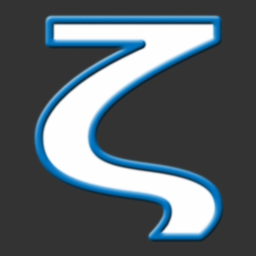
<style>
.page{position:relative;width:256px;height:256px;background:#333333}
.page>*{position:absolute;margin:0}
.t1{font:250px "Consolas-Bold";color:#fffefe;scale:1.67 1}
</style>
<div class="page">
<p class="t1" style="left:38px;top:19px;width:181px;height:218px">ζ</p>
</div>
